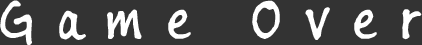
<style>
.page{position:relative;width:422px;height:45px;background:#333333}
.page>*{position:absolute;margin:0}
.t1{font:64px "BuxtonSketch";letter-spacing:0.36em;color:#ffffff}
</style>
<div class="page">
<p class="t1" style="left:0px;top:0px;width:422px;height:45px">Game Over</p>
</div>
